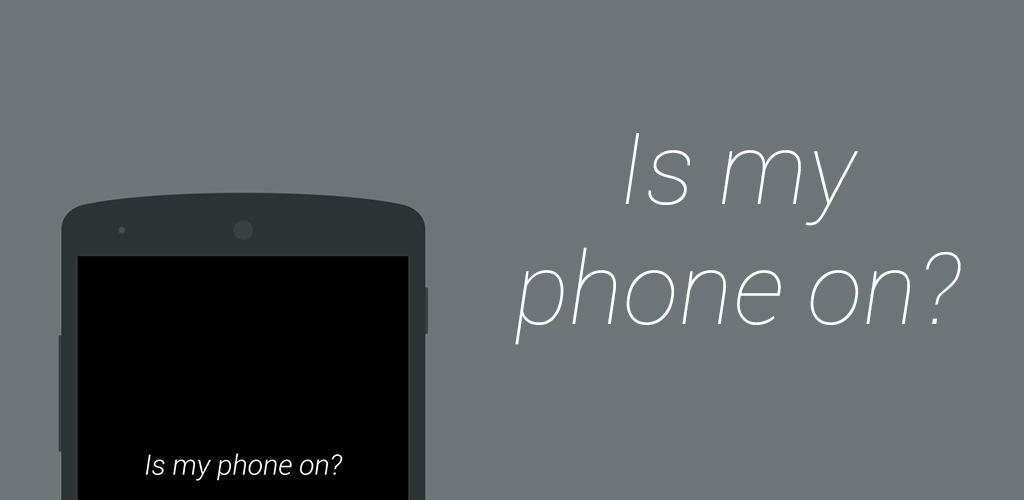
<style>
.page{position:relative;width:1024px;height:500px;background:#6d7578}
.page>*{position:absolute;margin:0}
.t1{font:100px "Roboto-ThinItalic";color:#ffffff}
</style>
<div class="page">
<p class="t1" style="left:515px;top:133px;width:446px;height:212px;text-align:center">Is my phone on?</p>
</div>
